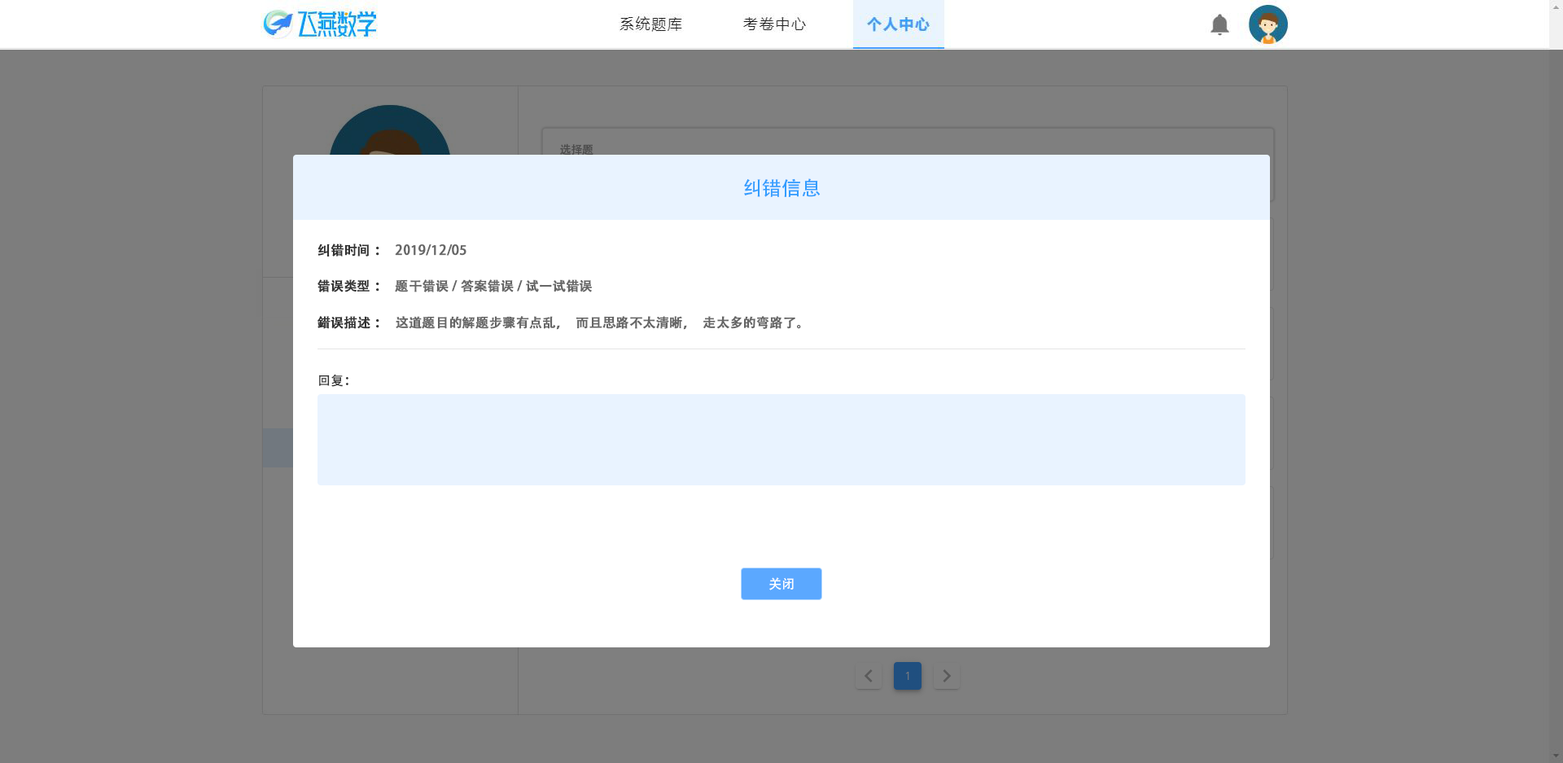
<style>
.page{position:relative;width:1563px;height:763px;background:#7d7d7d}
.page>*{position:absolute;margin:0}
.t1{font:11.4px "AdobeHeitiStd-Regular";color:#4c4c4c}
.t2{font:19.5px "AdobeHeitiStd-Regular";color:#339dff}
.t3{font:13px "AdobeHeitiStd-Regular";color:#333333;font-weight:bold}
.t4{font:13px "AdobeHeitiStd-Regular";color:#666666;font-weight:bold}
.t5{font:13px "AdobeHeitiStd-Regular";color:#333333}
.t6{font:13px "AdobeHeitiStd-Regular";color:#ffffff}
</style>
<div class="page">
<p class="t1" style="left:560px;top:143px;width:34px;height:12px">选择题</p>
<p class="t2" style="left:744px;top:178px;width:77px;height:19px">纠错信息</p>
<p class="t3" style="left:318px;top:243px;width:61px;height:13px">纠错时间：</p>
<p class="t4" style="left:395px;top:244px;width:71px;height:12px">2019/12/05</p>
<p class="t3" style="left:318px;top:279px;width:61px;height:13px">错误类型：</p>
<p class="t4" style="left:395px;top:279px;width:197px;height:13px">题干错误/答案错误/试一试错误</p>
<p class="t3" style="left:318px;top:316px;width:61px;height:13px">错误描述：</p>
<p class="t4" style="left:396px;top:316px;width:405px;height:14px">这道题目的解题步骤有点乱，而且思路不太清晰，走太多的弯路了。</p>
<p class="t5" style="left:319px;top:374px;width:29px;height:13px">回复：</p>
<p class="t6" style="left:769px;top:577px;width:25px;height:13px">关闭</p>
</div>
